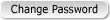
<style>
.page{position:relative;width:110px;height:20px}
.page>*{position:absolute;margin:0}
.t1{font:11px "Verdana";color:#000000;scale:0.9 1}
</style>
<div class="page">
<p class="t1" style="left:11px;top:4px;width:87px;height:12px">Change Password</p>
</div>
